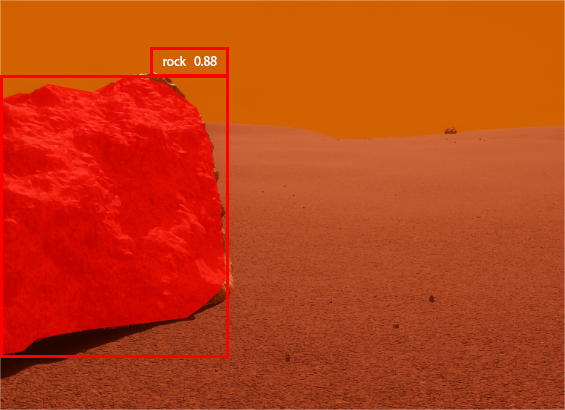
<style>
.page{position:relative;width:565px;height:410px}
.page>*{position:absolute;margin:0}
.t1{font:12px "AdobeHeitiStd-Regular";color:#ffffff}
</style>
<div class="page">
<p class="t1" style="left:163px;top:56px;width:54px;height:10px">rock   0.88</p>
</div>
